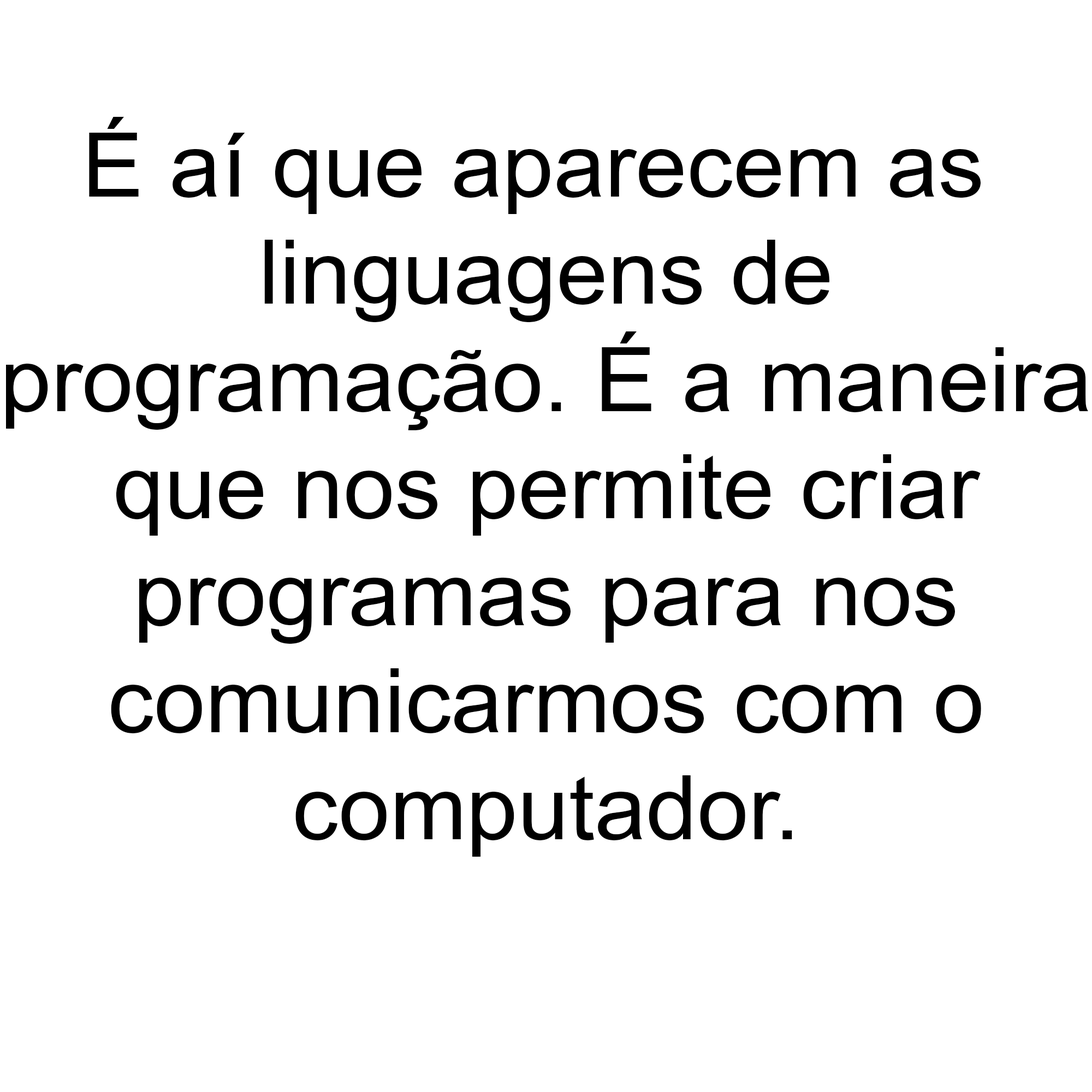
<style>
.page{position:relative;width:1092px;height:1092px;background:#ffffff}
.page>*{position:absolute;margin:0}
.t1{font:89.2px "ArialMT";color:#000000;scale:1.03 1}
</style>
<div class="page">
<p class="t1" style="left:6px;top:117px;width:1082px;height:740px;text-align:center">É aí que aparecem as <br>linguagens de<br>programação. É a maneira<br>que nos permite criar<br>programas para nos<br>comunicarmos com o<br>computador.</p>
</div>
